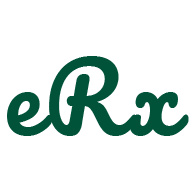
<style>
.page{position:relative;width:192px;height:192px;background:#ffffff}
.page>*{position:absolute;margin:0}
.t1{font:94.4px "Pacifico-Regular";letter-spacing:0.04em;color:#005239}
</style>
<div class="page">
<p class="t1" style="left:7px;top:56px;width:182px;height:80px">eRx</p>
</div>
